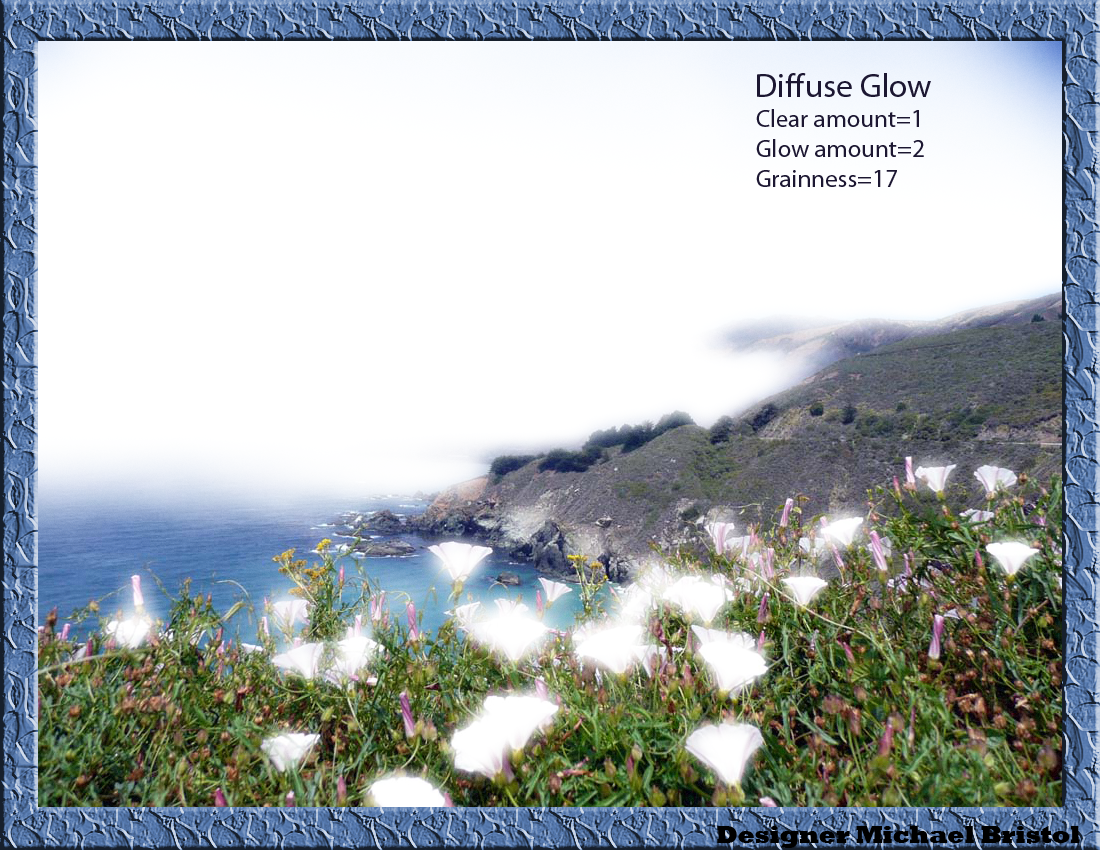
<style>
.page{position:relative;width:1100px;height:850px;background:#ffffff}
.page>*{position:absolute;margin:0}
.t1{font:25px "MyriadPro-Regular";color:#1c1732}
.t2{font:33.3px "MyriadPro-Regular";color:#1c1732}
.t3{font:25.4px "Rockwell-ExtraBold";color:#000000;scale:0.97 1}
</style>
<div class="page">
<p class="t1" style="left:756px;top:73px;width:175px;height:114px"><span class="t2">Diffuse Glow <br></span>Clear amount=1<br>Glow amount=2<br>Grainness=17</p>
<p class="t3" style="left:717px;top:826px;width:363px;height:22px">Designer Michael Bristol</p>
</div>
